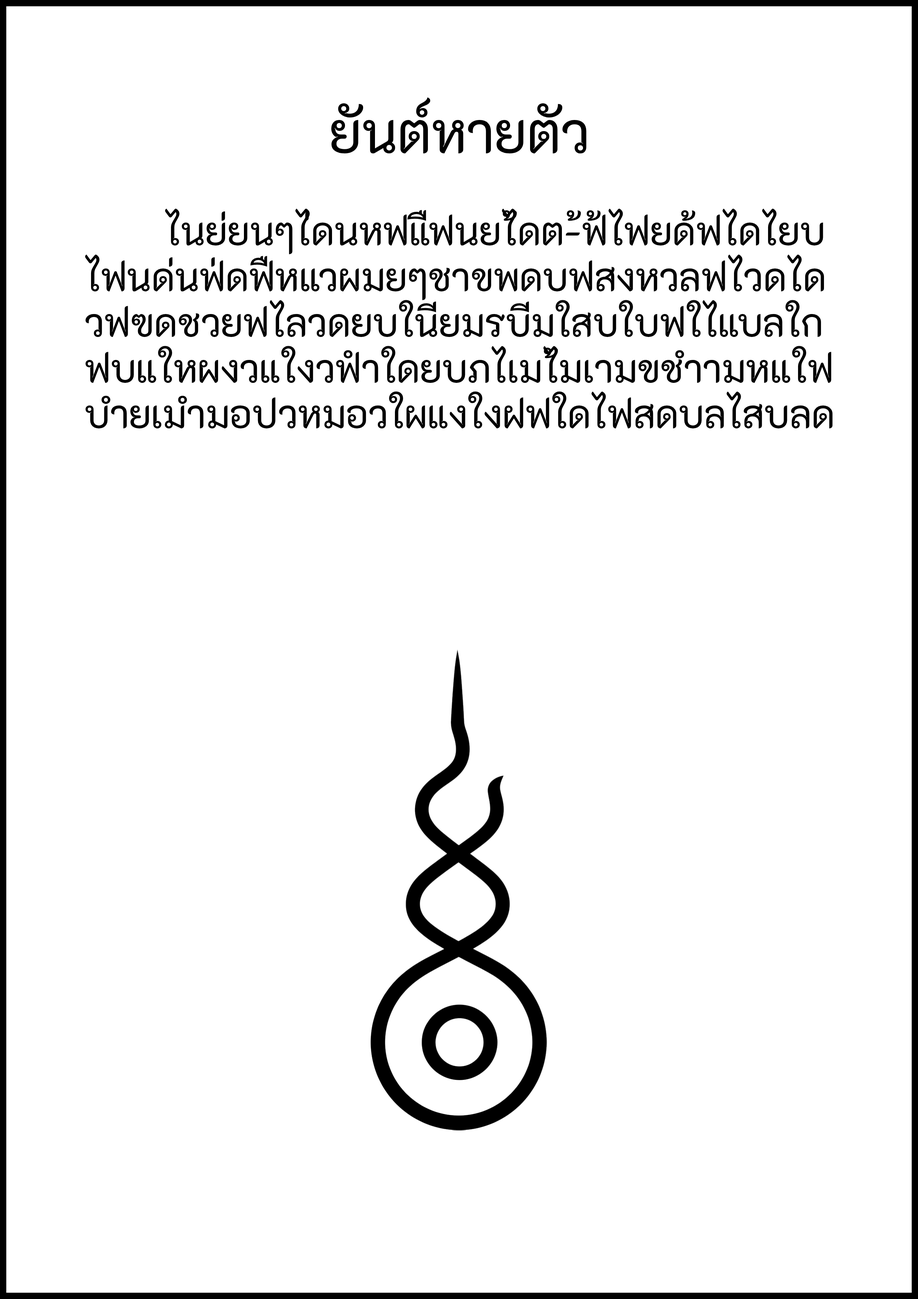
<style>
.page{position:relative;width:918px;height:1299px;background:#ffffff}
.page>*{position:absolute;margin:0}
.t1{font:55.5px "K2D-Regular";color:#000000}
.t2{font:38.1px "K2D-Regular";color:#000000}
</style>
<div class="page">
<p class="t1" style="left:331px;top:97px;width:255px;height:57px">ยันต์หายตัว</p>
<p class="t2" style="left:85px;top:208px;width:748px;height:220px">ไนย่ยนๆไ่ดนหฟแืฟนยไ้ดต-้ฟ้ไฟยด้ฟไดไยบ<br>ไฟนด่นฟ่ดฟืหแวผมยๆชาขพดบฟสงหวลฟไวดได<br>วฟฃดชวยฟไลวดยบในียมรบีมใสบใบฟใไแบลใก<br>ฟบแใหผงวแใงวฟำใดยบภไเมไ้มเามขชำามหแใฟ<br>บำยเมำมอปวหมอวใผแงใงฝฟใดไฟสดบลไสบลด</p>
</div>
